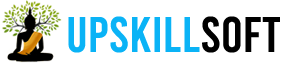
<style>
.page{position:relative;width:292px;height:63px;background:#ffffff}
.page>*{position:absolute;margin:0}
.t1{font:50px "Bebas-Regular";color:#0ab3f6}
.t2{font:50px "Bebas-Regular";color:#000000}
</style>
<div class="page">
<p class="t1" style="left:68px;top:16px;width:212px;height:37px">UPSKILL<span class="t2">SOFT</span></p>
</div>
